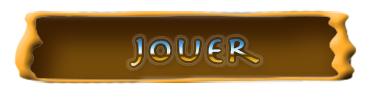
<style>
.page{position:relative;width:370px;height:90px;background:#ffffff}
.page>*{position:absolute;margin:0}
.t1{font:36.2px "Herculanum";scale:1.19 1}
</style>
<div class="page">
<p class="t1" style="left:130px;top:38px;width:129px;height:28px">Jouer</p>
</div>
